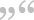
<style>
.page{position:relative;width:34px;height:20px;background:#ffffff}
.page>*{position:absolute;margin:0}
.t1{font:48px "Georgia";color:#bebebe}
</style>
<div class="page">
<p class="t1" style="left:18px;top:0px;width:16px;height:13px">„“</p>
<p class="t1" style="left:0px;top:7px;width:15px;height:13px">„“</p>
</div>
